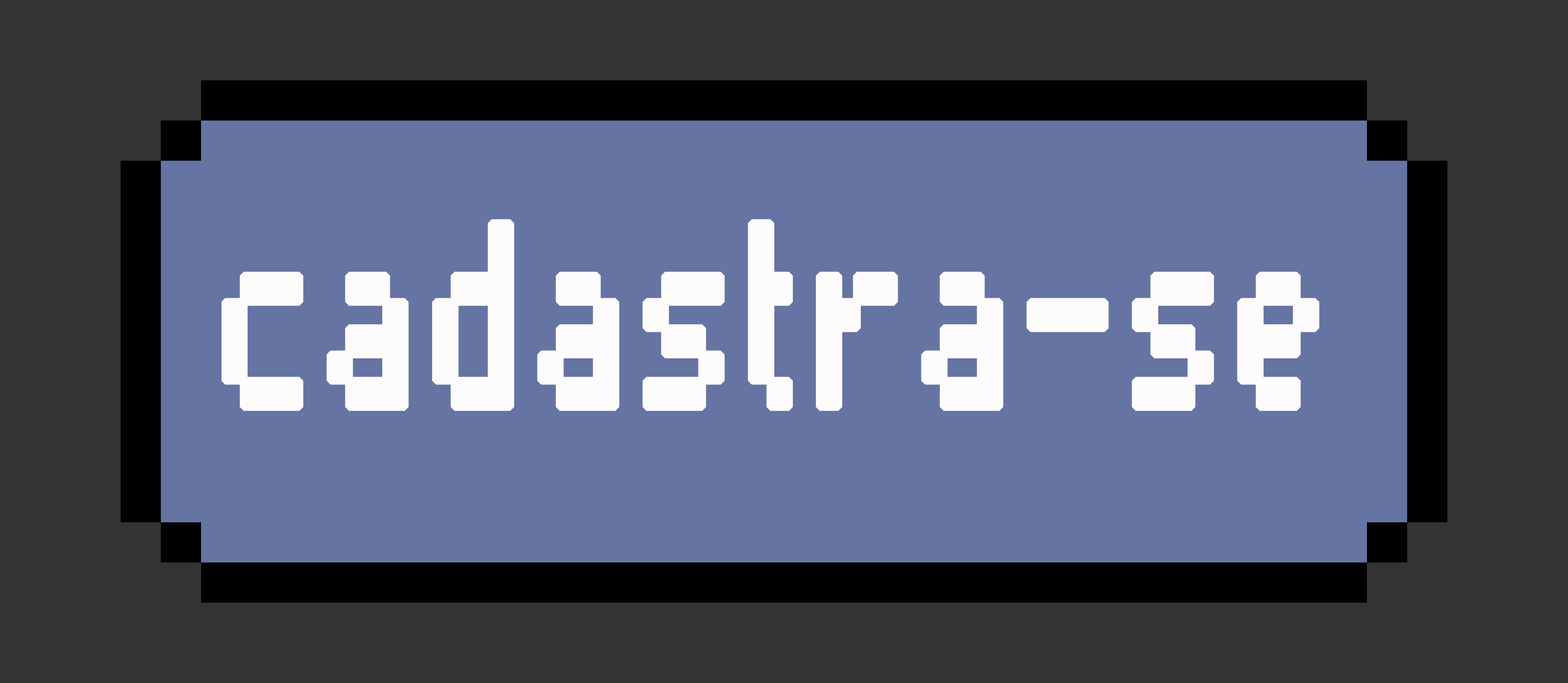
<style>
.page{position:relative;width:1568px;height:683px;background:#6574a3}
.page>*{position:absolute;margin:0}
.t1{font:341.7px "Pixelade";letter-spacing:0.025em;color:#fefbfc;font-weight:bold;scale:0.71 1}
</style>
<div class="page">
<p class="t1" style="left:222px;top:219px;width:1098px;height:192px">cadastra-se</p>
</div>
